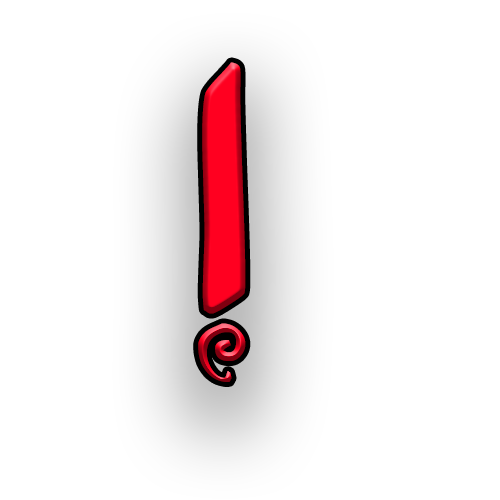
<style>
.page{position:relative;width:500px;height:500px;background:#ffffff}
.page>*{position:absolute;margin:0}
.t1{font:500px "ChristmasOnCrack";letter-spacing:-0.01em;color:#ff0020}
</style>
<div class="page">
<p class="t1" style="left:198px;top:62px;width:48px;height:320px">!</p>
</div>
